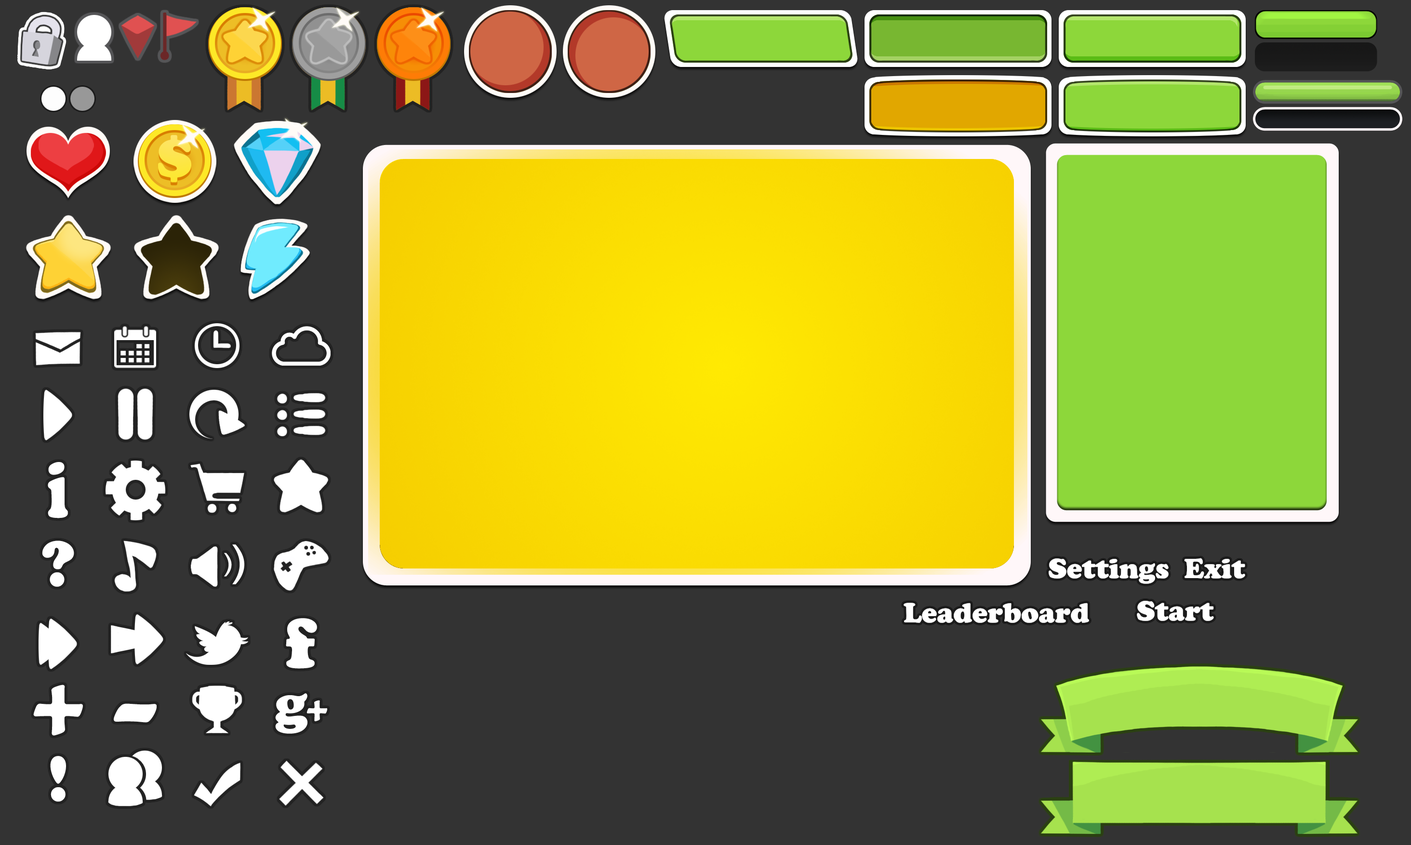
<style>
.page{position:relative;width:1411px;height:845px;background:#333333}
.page>*{position:absolute;margin:0}
.t1{font:82.6px "CooperBlack";color:#ffffff;scale:0.71 1}
.t2{font:67.5px "CooperBlack";color:#ffffff}
.t3{font:28.9px "CooperBlack";color:#ffffff}
.t4{font:73.4px "CooperBlack";letter-spacing:0.025em;color:#ffffff}
.t5{font:102.2px "CooperBlack";letter-spacing:0.025em;color:#ffffff}
.t6{font:102.2px "CooperBlack";letter-spacing:0.025em;color:#ffffff;scale:1.47 1}
</style>
<div class="page">
<p class="t1" style="left:48px;top:462px;width:20px;height:56px">i</p>
<p class="t2" style="left:42px;top:541px;width:32px;height:46px">?</p>
<p class="t3" style="left:1183px;top:558px;width:63px;height:21px">Exit</p>
<p class="t3" style="left:1048px;top:558px;width:121px;height:26px">Settings</p>
<p class="t3" style="left:903px;top:603px;width:186px;height:21px">Leaderboard</p>
<p class="t3" style="left:1136px;top:601px;width:78px;height:21px">Start</p>
<p class="t4" style="left:286px;top:618px;width:31px;height:51px">f</p>
<p class="t5" style="left:33px;top:685px;width:50px;height:51px">+</p>
<p class="t6" style="left:114px;top:704px;width:43px;height:19px">-</p>
<p class="t2" style="left:50px;top:756px;width:16px;height:46px">!</p>
</div>
